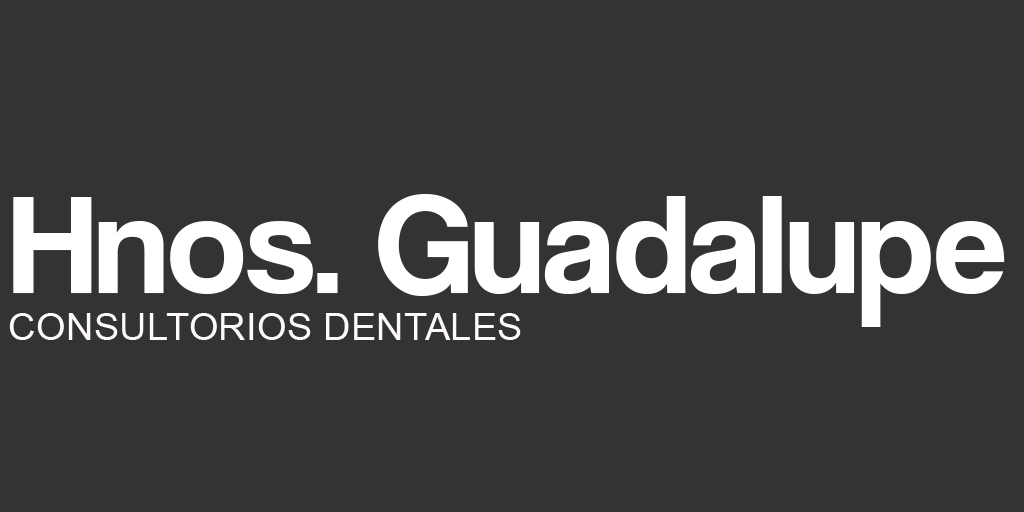
<style>
.page{position:relative;width:1024px;height:512px;background:#333333}
.page>*{position:absolute;margin:0}
.t1{font:144.7px "CoolveticaRg-Regular";color:#ffffff}
.t2{font:38.4px "ArialMT";color:#fefafa}
</style>
<div class="page">
<p class="t1" style="left:13px;top:194px;width:992px;height:133px">Hnos. Guadalupe</p>
<p class="t2" style="left:9px;top:313px;width:512px;height:27px">CONSULTORIOS DENTALES</p>
</div>
